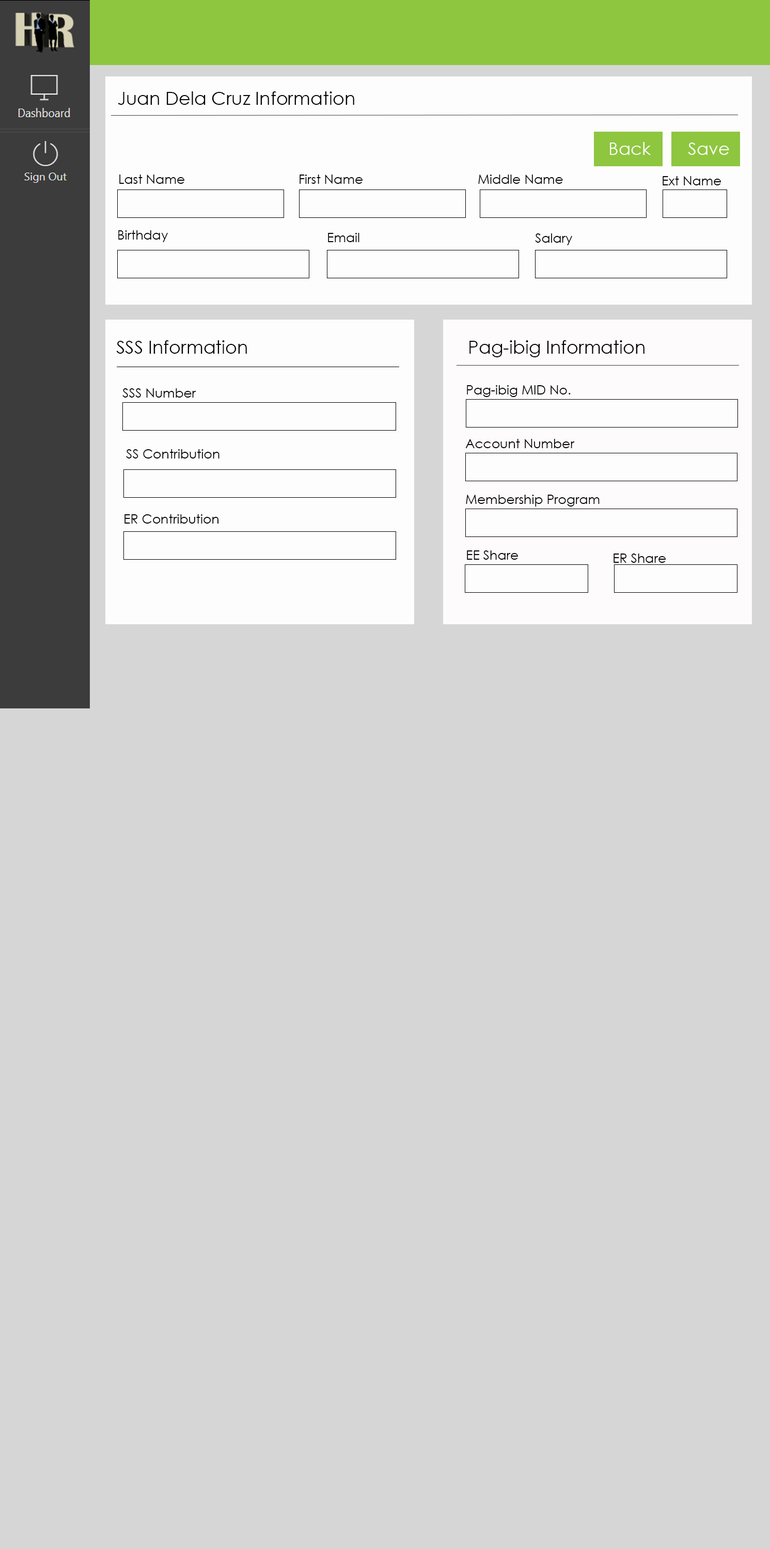
<style>
.page{position:relative;width:770px;height:1549px;background:#d7d6d6}
.page>*{position:absolute;margin:0}
.t1{font:18.1px "CenturyGothic";color:#030303}
.t2{font:17.6px "CenturyGothic";color:#fcfbf8}
.t3{font:17.6px "CenturyGothic";color:#fdfdfa}
.t4{font:12.8px "CenturyGothic";color:#030303}
.t5{font:12.9px "CenturyGothic";color:#030303}
</style>
<div class="page">
<p class="t1" style="left:118px;top:91px;width:236px;height:14px">Juan Dela Cruz Information</p>
<p class="t2" style="left:610px;top:142px;width:41px;height:13px">Back</p>
<p class="t3" style="left:688px;top:143px;width:41px;height:12px">Save</p>
<p class="t4" style="left:119px;top:175px;width:66px;height:9px">Last Name</p>
<p class="t5" style="left:299px;top:175px;width:64px;height:9px">First Name</p>
<p class="t4" style="left:478px;top:175px;width:85px;height:9px">Middle Name</p>
<p class="t4" style="left:662px;top:176px;width:59px;height:9px">Ext Name</p>
<p class="t4" style="left:118px;top:230px;width:50px;height:12px">Birthday</p>
<p class="t4" style="left:328px;top:233px;width:31px;height:9px">Email</p>
<p class="t4" style="left:535px;top:233px;width:37px;height:12px">Salary</p>
<p class="t1" style="left:116px;top:340px;width:131px;height:14px">SSS Information</p>
<p class="t1" style="left:469px;top:340px;width:175px;height:17px">Pag-ibig Information</p>
<p class="t5" style="left:122px;top:388px;width:74px;height:10px">SSS Number</p>
<p class="t5" style="left:467px;top:385px;width:104px;height:12px">Pag-ibig MID No.</p>
<p class="t5" style="left:126px;top:449px;width:93px;height:9px">SS Contribution</p>
<p class="t5" style="left:465px;top:439px;width:110px;height:9px">Account Number</p>
<p class="t5" style="left:466px;top:495px;width:133px;height:12px">Membership Program</p>
<p class="t4" style="left:124px;top:514px;width:95px;height:10px">ER Contribution</p>
<p class="t5" style="left:467px;top:550px;width:51px;height:10px">EE Share</p>
<p class="t4" style="left:613px;top:553px;width:53px;height:10px">ER Share</p>
</div>
